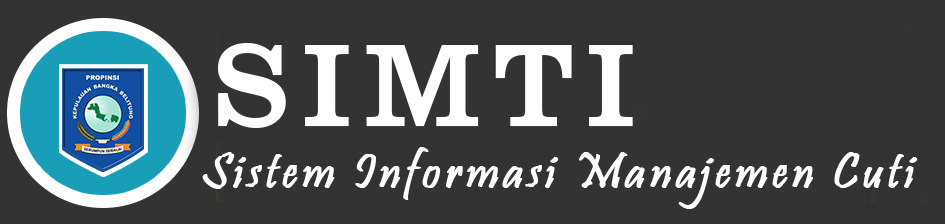
<style>
.page{position:relative;width:945px;height:224px;background:#333333}
.page>*{position:absolute;margin:0}
.t1{font:120px "ClarendonBT-Roman";letter-spacing:0.1em;color:#ffffff}
.t2{font:50px "Pristina-Regular";letter-spacing:0.075em;color:#ffffff;font-weight:bold}
</style>
<div class="page">
<p class="t1" style="left:218px;top:43px;width:415px;height:85px">SIMTI</p>
<p class="t2" style="left:202px;top:147px;width:716px;height:62px">Sistem Informasi Manajemen Cuti</p>
</div>
